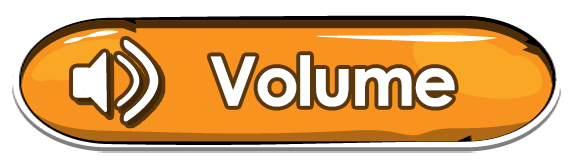
<style>
.page{position:relative;width:587px;height:168px;background:#ffffff}
.page>*{position:absolute;margin:0}
.t1{font:68px "CenturyGothic-Bold";letter-spacing:-0.05em;color:#ffffff;font-weight:bold}
</style>
<div class="page">
<p class="t1" style="left:210px;top:55px;width:245px;height:52px">Volume</p>
</div>
